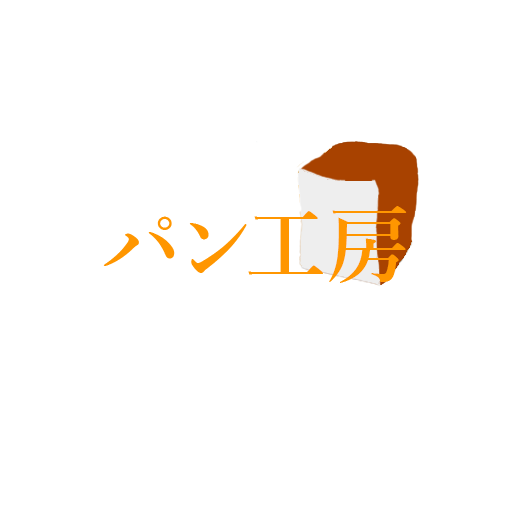
<style>
.page{position:relative;width:512px;height:512px;background:#ffffff}
.page>*{position:absolute;margin:0}
.t1{font:83.3px "YuMincho-Demibold";color:#ff9600}
</style>
<div class="page">
<p class="t1" style="left:103px;top:206px;width:304px;height:77px">パン工房</p>
</div>
